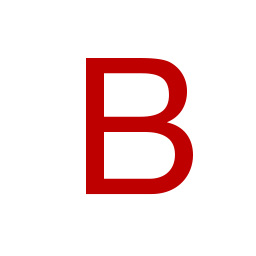
<style>
.page{position:relative;width:256px;height:256px;background:#ffffff}
.page>*{position:absolute;margin:0}
.t1{font:190px "HelveticaNeueLTPro-Roman";color:#be0000}
</style>
<div class="page">
<p class="t1" style="left:86px;top:58px;width:107px;height:137px">B</p>
</div>
